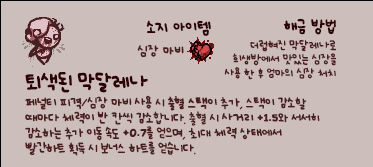
<style>
.page{position:relative;width:373px;height:167px;background:#ccbebb}
.page>*{position:absolute;margin:0}
.t1{font:12px "UhBeeSe_hyunBold";color:#2e0304}
.t2{font:12px "UhBeeSe_hyunBold";letter-spacing:-0.1em;color:#2e0304}
.t3{font:12px "UhBeeSe_hyunBold";letter-spacing:-0.15em;color:#2e0304}
.t4{font:9px/13.7px "UhBeeSe_hyunBold";letter-spacing:-0.025em;color:#4b1c1c}
.t5{font:9px/13.7px "UhBeeSe_hyunBold";letter-spacing:-0.1em;color:#4b1c1c}
.t6{font:9px/13.7px "UhBeeSe_hyunBold";letter-spacing:-0.125em;color:#4b1c1c}
.t7{font:10px "UhBeeSe_hyunBold";color:#4b1c1c}
.t8{font:10px/11.5px "UhBeeSe_hyunBold";letter-spacing:-0.05em;color:#4b1c1c}
.t9{font:15.2px/24px "UhBeeSe_hyunBold";letter-spacing:-0.1em;color:#2e0304;scale:1.05 1}
.t10{font:16px/24px "UhBeeSe_hyunBold";letter-spacing:-0.05em;color:#2e0304}
.t11{font:16px/24px "UhBeeSe_hyunBold";letter-spacing:-0.025em;color:#2e0304}
.t12{font:10px/11.5px "UhBeeSe_hyunBold";letter-spacing:-0.15em;color:#4b1c1c}
.t13{font:10px/11.5px "UhBeeSe_hyunBold";letter-spacing:-0.05em;color:#4b1c1c;font-weight:bold}
.t14{font:10px/12px "UhBeeSe_hyunBold";letter-spacing:-0.05em;color:#4b1c1c}
.t15{font:10px/15px "UhBeeSe_hyunBold";letter-spacing:-0.05em;color:#4b1c1c}
.t16{font:10px/15px "UhBeeSe_hyun";letter-spacing:-0.05em;color:#4b1c1c}
.t17{font:15px/15px "Font_soulsV2_Body-Regular";letter-spacing:-0.05em;color:#4b1c1c}
.t18{font:10px/19px "UhBeeSe_hyunBold";letter-spacing:-0.15em;color:#4b1c1c}
.t19{font:10px/19px "UhBeeSe_hyunBold";letter-spacing:-0.05em;color:#4b1c1c}
.t20{font:15px/19px "Font_soulsV2_Body-Regular";letter-spacing:-0.05em;color:#4b1c1c}
.t21{font:10px/14px "UhBeeSe_hyunBold";letter-spacing:-0.1em;color:#4b1c1c}
.t22{font:10px/14px "UhBeeSe_hyunBold";letter-spacing:-0.05em;color:#4b1c1c}
</style>
<div class="page">
<p class="t1" style="left:146px;top:20px;width:65px;height:16px"><span class="t2">소</span>지 아이템</p>
<p class="t1" style="left:283px;top:18px;width:53px;height:17px">해금 방<span class="t3">법</span></p>
<p class="t4" style="left:224px;top:40px;width:112px;height:40px;text-align:right">더럽<span class="t5">혀</span>진 막달레나로<br>희생방에서 <span class="t6">맛</span>있는 심장을<br>사용 한 후 엄마의 <span class="t6">심</span>장 처치</p>
<p class="t7" style="left:137px;top:44px;width:47px;height:14px">심장 마비</p>
<p class="t8" style="left:25px;top:72px;width:295px;height:84px"><span class="t9">토</span><span class="t10">ㅣ</span><span class="t11">색</span><span class="t10">된 막달레나<br></span>페널티 피격/심장 마비 사용 시 <span class="t12">출</span>혈<span class="t13"> 스택</span>이 추가, 스택이 감소할<br><span class="t14">때마다 </span><span class="t15">체력이 반 칸씩 감소</span><span class="t16">합</span><span class="t15">니다. </span><span class="t16">출혈</span><span class="t15"> 시 사거리 </span><span class="t17">+1.5</span><span class="t15">와 서서히<br>감소하는 </span><span class="t18">추</span><span class="t19">가 이동 속도 </span><span class="t20">+0.7</span><span class="t19">를 얻으며, 최대 체력 상태에서<br></span><span class="t18">빨간하</span><span class="t19">트 획득 시 보너스 </span><span class="t21">하</span><span class="t22">트를 얻습니다.</span></p>
</div>
